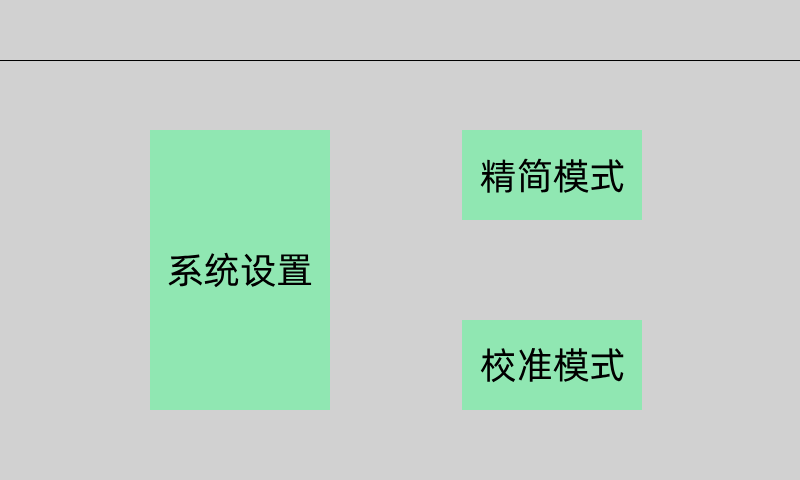
<style>
.page{position:relative;width:800px;height:480px;background:#d1d1d1}
.page>*{position:absolute;margin:0}
.t1{font:37px "AlibabaPuHuiTi-Regular";color:#000000}
</style>
<div class="page">
<p class="t1" style="left:480px;top:158px;width:144px;height:35px">精简模式</p>
<p class="t1" style="left:168px;top:252px;width:144px;height:36px">系统设置</p>
<p class="t1" style="left:480px;top:347px;width:144px;height:36px">校准模式</p>
</div>
